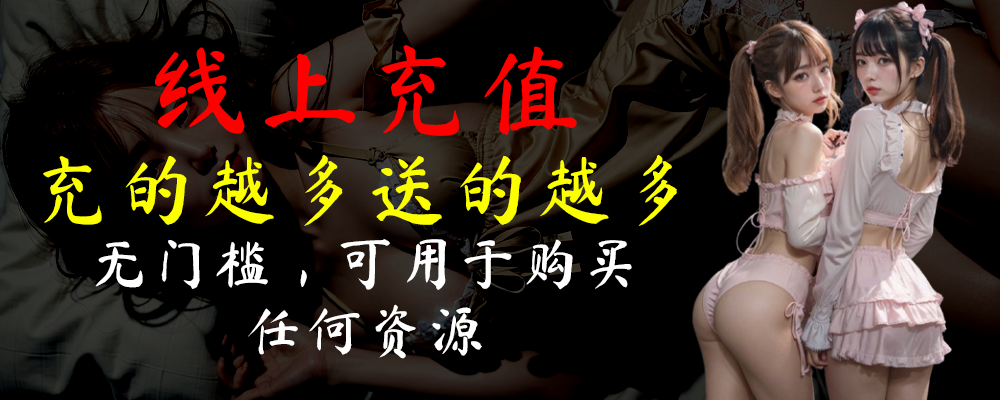
<style>
.page{position:relative;width:1000px;height:400px;background:#000000}
.page>*{position:absolute;margin:0}
.t1{font:55.9px "MaShanZheng-Regular";letter-spacing:0.1em;color:#ffffff}
.t2{font:100.3px "MaShanZheng-Regular";letter-spacing:0.1em;color:#ff0000}
.t3{font:76.1px "MaShanZheng-Regular";letter-spacing:0.1em;color:#fcff00}
</style>
<div class="page">
<p class="t1" style="left:43px;top:45px;width:634px;height:314px;text-align:center"><span class="t2">线上充值<br></span><span class="t3">充的越多送的越多<br></span>无门槛，可用于购买<br>任何资源</p>
</div>
